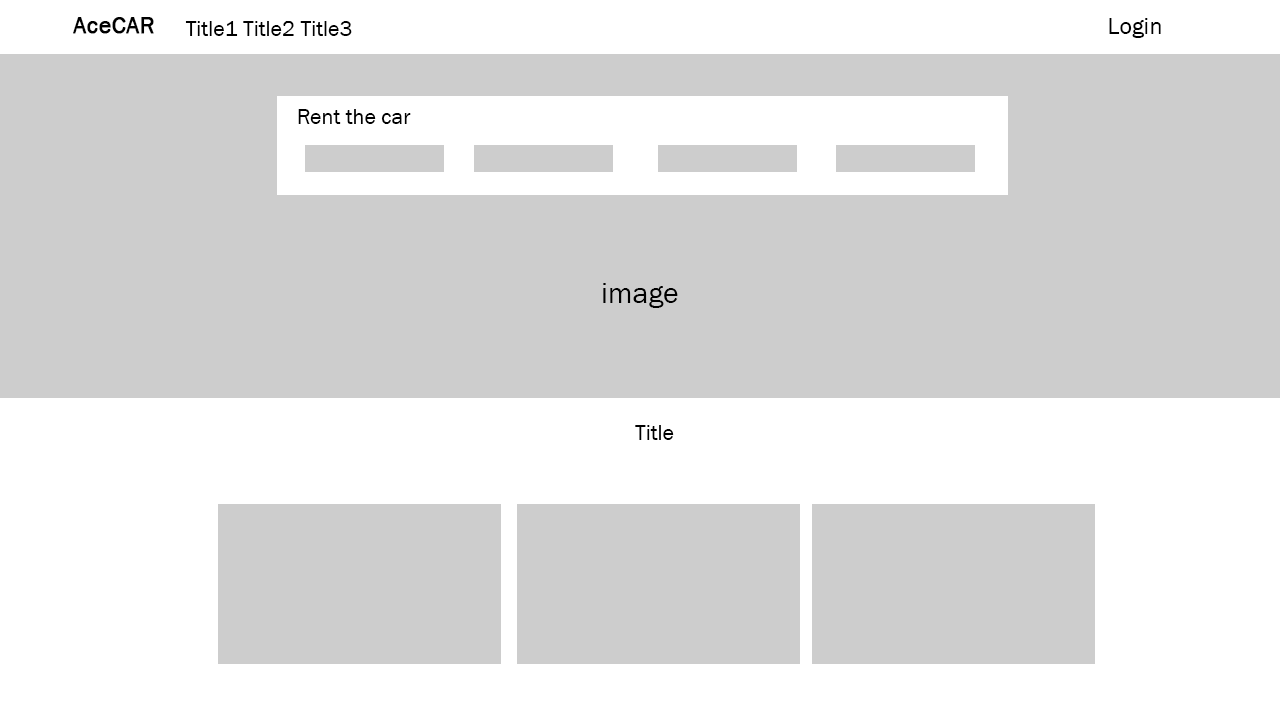
<style>
.page{position:relative;width:1280px;height:720px;background:#cdcdcd}
.page>*{position:absolute;margin:0}
.t1{font:24px "FranklinGothic-Book";color:#000000;font-weight:bold}
.t2{font:22px "FranklinGothic-Book";color:#000000}
.t3{font:24px "FranklinGothic-Book";color:#000000}
.t4{font:30px "FranklinGothic-Book";color:#000000}
</style>
<div class="page">
<p class="t1" style="left:73px;top:17px;width:81px;height:17px">AceCAR</p>
<p class="t2" style="left:185px;top:21px;width:167px;height:15px">Title1 Title2 Title3</p>
<p class="t3" style="left:1109px;top:18px;width:52px;height:20px">Login</p>
<p class="t2" style="left:298px;top:109px;width:113px;height:15px">Rent the car</p>
<p class="t4" style="left:603px;top:283px;width:75px;height:25px">image</p>
<p class="t2" style="left:635px;top:425px;width:39px;height:15px">Title</p>
</div>
